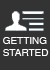
<style>
.page{position:relative;width:50px;height:70px;background:#333333}
.page>*{position:absolute;margin:0}
.t1{font:10px "Helvetica";color:#ffffff}
</style>
<div class="page">
<p class="t1" style="left:3px;top:37px;width:46px;height:19px">GETTING<br>STARTED</p>
</div>
